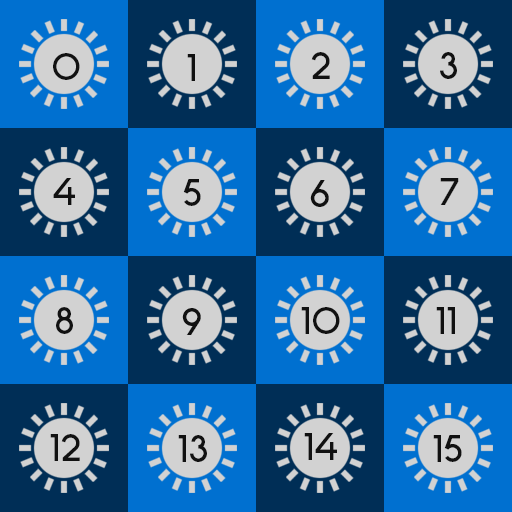
<style>
.page{position:relative;width:512px;height:512px;background:#0070d0}
.page>*{position:absolute;margin:0}
.t1{font:36px "Stark";color:#111111}
</style>
<div class="page">
<p class="t1" style="left:53px;top:53px;width:27px;height:27px">0</p>
<p class="t1" style="left:187px;top:54px;width:8px;height:27px">1</p>
<p class="t1" style="left:311px;top:52px;width:19px;height:27px">2</p>
<p class="t1" style="left:440px;top:52px;width:17px;height:27px">3</p>
<p class="t1" style="left:53px;top:178px;width:22px;height:27px">4</p>
<p class="t1" style="left:183px;top:179px;width:18px;height:27px">5</p>
<p class="t1" style="left:310px;top:180px;width:19px;height:27px">6</p>
<p class="t1" style="left:440px;top:178px;width:19px;height:27px">7</p>
<p class="t1" style="left:56px;top:307px;width:17px;height:27px">8</p>
<p class="t1" style="left:182px;top:308px;width:19px;height:27px">9</p>
<p class="t1" style="left:301px;top:307px;width:39px;height:27px">10</p>
<p class="t1" style="left:436px;top:307px;width:19px;height:27px">11</p>
<p class="t1" style="left:50px;top:434px;width:30px;height:27px">12</p>
<p class="t1" style="left:178px;top:435px;width:29px;height:27px">13</p>
<p class="t1" style="left:304px;top:433px;width:33px;height:27px">14</p>
<p class="t1" style="left:433px;top:435px;width:29px;height:27px">15</p>
</div>
